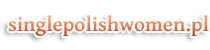
<style>
.page{position:relative;width:210px;height:50px;background:#ffffff}
.page>*{position:absolute;margin:0}
.t1{font:21px "GentiumBasic-Bold"}
</style>
<div class="page">
<p class="t1" style="left:8px;top:15px;width:201px;height:21px">singlepolishwomen.pl</p>
</div>
